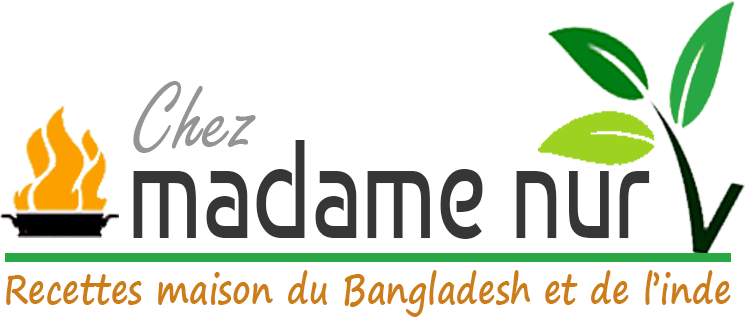
<style>
.page{position:relative;width:745px;height:320px;background:#ffffff}
.page>*{position:absolute;margin:0}
.t1{font:105.1px "FreestyleScript-Regular";color:#959393;scale:0.94 1}
.t2{font:139.5px "Baumans-Regular";color:#353635;scale:0.72 1}
.t3{font:40.5px "SegoePrint-Bold";color:#cc7d15;scale:0.82 1}
</style>
<div class="page">
<p class="t1" style="left:133px;top:81px;width:123px;height:72px">Chez</p>
<p class="t2" style="left:133px;top:140px;width:517px;height:99px">madame nur</p>
<p class="t3" style="left:6px;top:270px;width:725px;height:47px">Recettes maison du Bangladesh et de l’inde</p>
</div>
